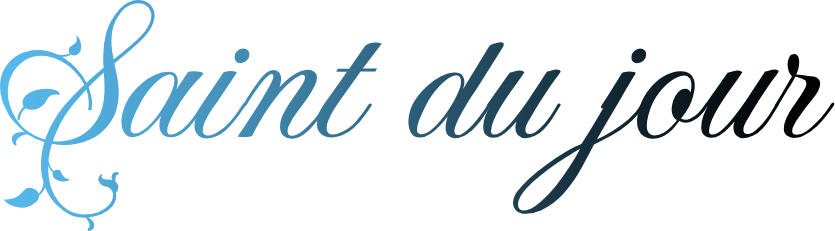
<style>
.page{position:relative;width:835px;height:231px;background:#ffffff}
.page>*{position:absolute;margin:0}
.t1{font:200px "FleurDeLeah-Regular"}
</style>
<div class="page">
<p class="t1" style="left:0px;top:0px;width:835px;height:231px">Saint du jour</p>
</div>
